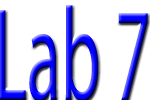
<style>
.page{position:relative;width:150px;height:100px;background:#ffffff}
.page>*{position:absolute;margin:0}
.t1{font:133.1px "MyriadPro-Regular";scale:0.53 1}
</style>
<div class="page">
<p class="t1" style="left:0px;top:5px;width:148px;height:97px">Lab 7</p>
</div>
